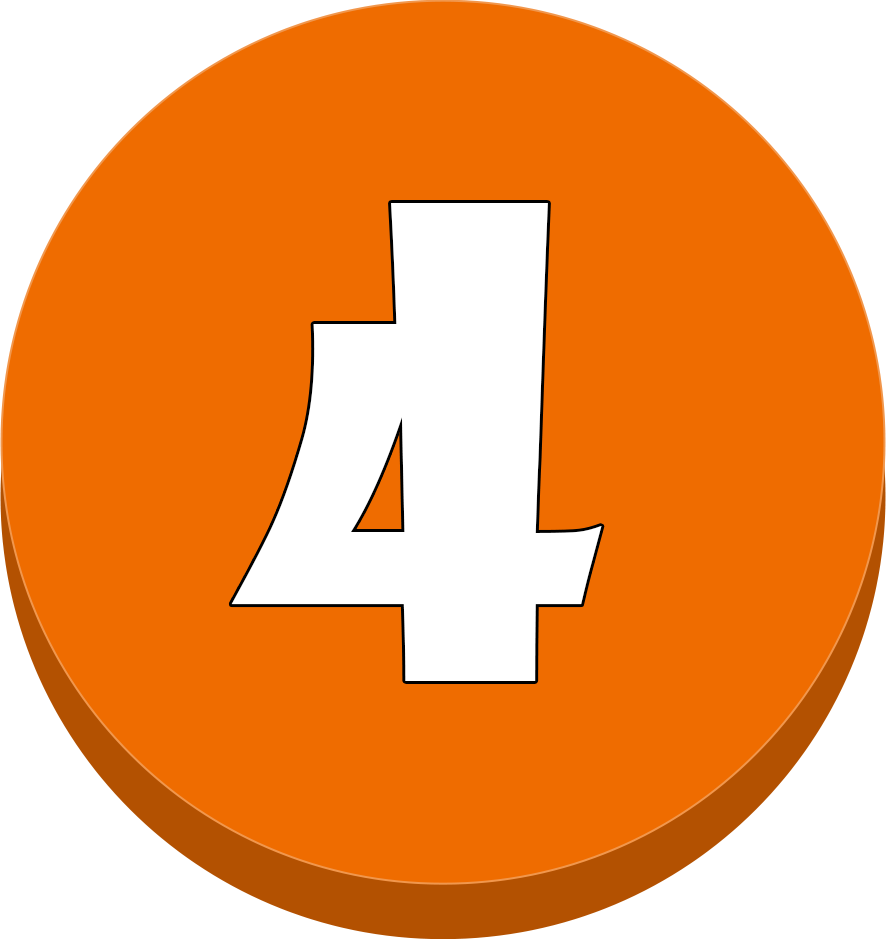
<style>
.page{position:relative;width:886px;height:939px;background:#ef6c00}
.page>*{position:absolute;margin:0}
.t1{font:637.2px "ShowcardGothic-Reg";color:#ffffff}
</style>
<div class="page">
<p class="t1" style="left:231px;top:203px;width:371px;height:478px">4</p>
</div>
